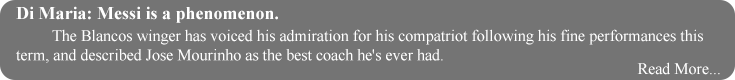
<style>
.page{position:relative;width:735px;height:80px;background:#747474}
.page>*{position:absolute;margin:0}
.t1{font:18px "TimesNewRomanPS-BoldMT";color:#ffffff}
.t2{font:16px "TimesNewRomanPSMT";color:#ffffff}
</style>
<div class="page">
<p class="t1" style="left:16px;top:6px;width:262px;height:17px">Di Maria: Messi is a phenomenon.</p>
<p class="t2" style="left:16px;top:29px;width:687px;height:34px">The Blancos winger has voiced his admiration for his compatriot following his fine performances this <br>term, and described Jose Mourinho as the best coach he's ever had.</p>
<p class="t2" style="left:637px;top:62px;width:83px;height:13px">Read More...</p>
</div>
